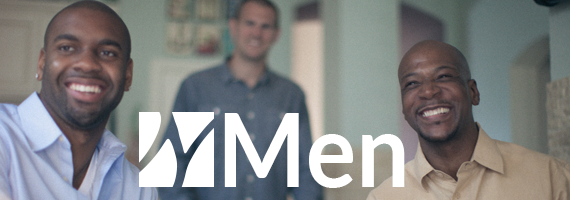
<style>
.page{position:relative;width:570px;height:200px}
.page>*{position:absolute;margin:0}
.t1{font:101.6px "Lato-Bold";color:#ffffff;scale:0.93 1}
</style>
<div class="page">
<p class="t1" style="left:224px;top:113px;width:181px;height:75px">Men</p>
</div>
